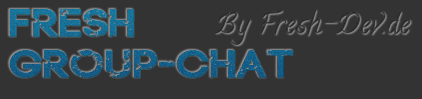
<style>
.page{position:relative;width:422px;height:99px;background:#333333}
.page>*{position:absolute;margin:0}
.t1{font:33.8px "LAStreetKids";letter-spacing:0.025em;color:#17648a;font-weight:bold}
</style>
<div class="page">
<p class="t1" style="left:9px;top:9px;width:285px;height:70px">Fresh <br>Group-Chat</p>
</div>
